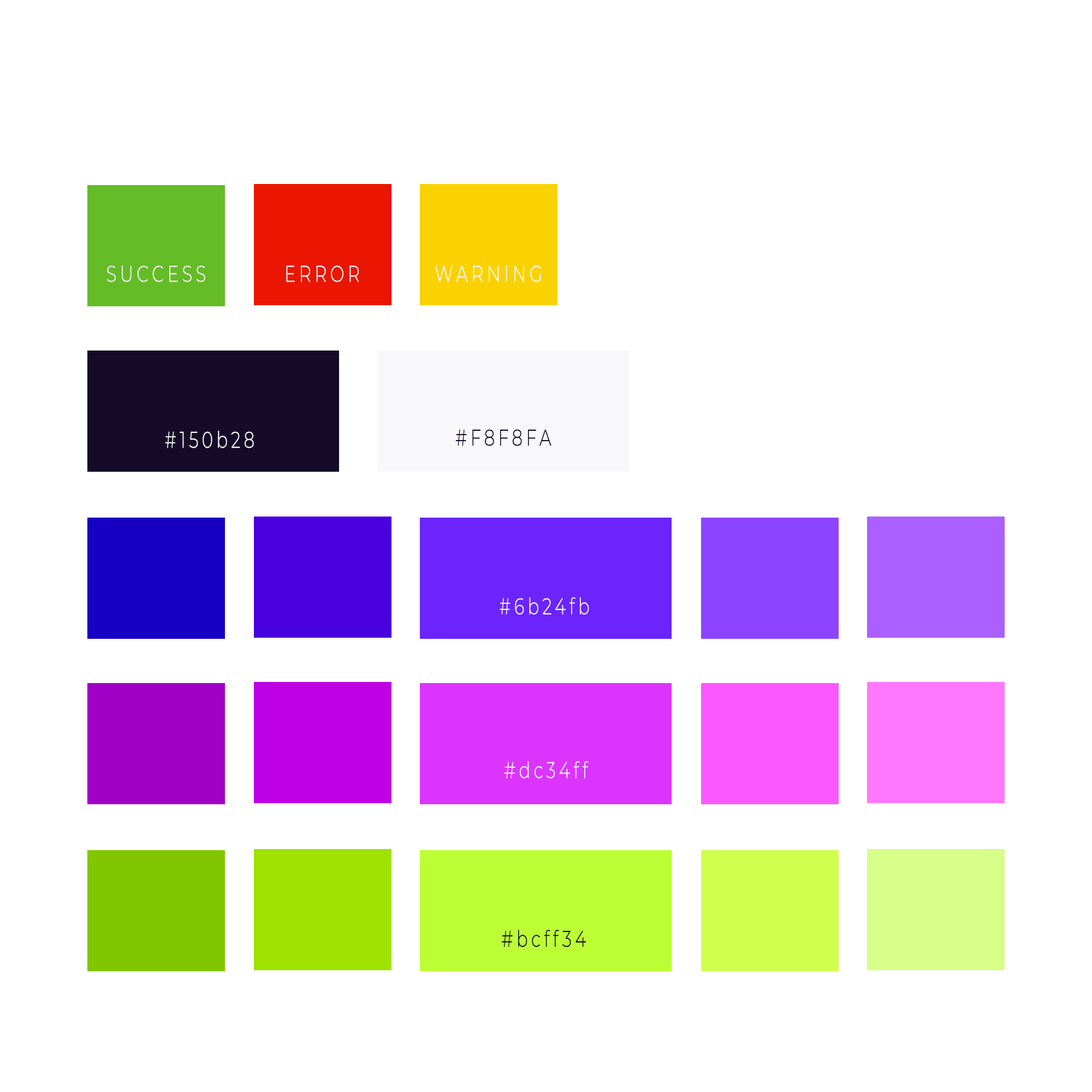
<style>
.page{position:relative;width:1092px;height:1092px;background:#ffffff}
.page>*{position:absolute;margin:0}
.t1{font:22.8px "Montserrat-Light";letter-spacing:0.2em;color:#f8f8fa;scale:0.74 1}
.t2{font:22.8px "Montserrat-Light";letter-spacing:0.2em;color:#130a24;scale:0.74 1}
.t3{font:22.8px "Montserrat-Light";letter-spacing:0.2em;color:#150b28;scale:0.74 1}
</style>
<div class="page">
<p class="t1" style="left:107px;top:265px;width:98px;height:17px">SUCCESS</p>
<p class="t1" style="left:286px;top:265px;width:73px;height:17px">ERROR</p>
<p class="t1" style="left:435px;top:265px;width:106px;height:17px">WARNING</p>
<p class="t1" style="left:165px;top:431px;width:89px;height:17px">#150b28</p>
<p class="t2" style="left:455px;top:429px;width:96px;height:17px">#F8F8FA</p>
<p class="t1" style="left:500px;top:597px;width:89px;height:18px">#6b24fb</p>
<p class="t1" style="left:504px;top:761px;width:85px;height:18px">#dc34ff</p>
<p class="t3" style="left:502px;top:930px;width:84px;height:17px">#bcff34</p>
</div>
